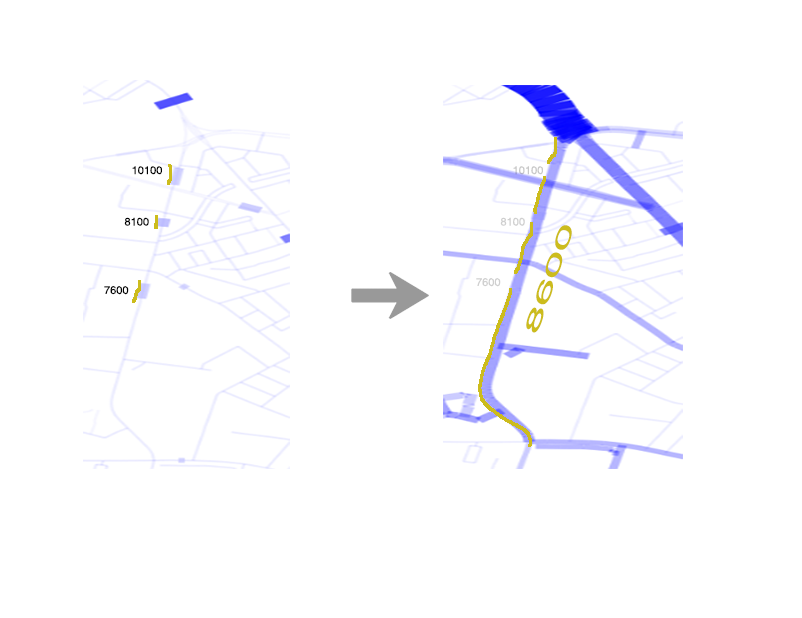
<style>
.page{position:relative;width:802px;height:618px;background:#ffffff}
.page>*{position:absolute;margin:0}
.t1{font:11px "Helvetica";letter-spacing:0.003em;color:#000000}
.t2{font:11px "Helvetica";letter-spacing:0.003em;color:#c9c9c9}
.t3{font:11px "Helvetica";letter-spacing:0.003em;color:#cfcfcf}
.t4{font:19.8px "Helvetica";letter-spacing:0.003em;color:#ccbc1d;scale:2.62 1}
</style>
<div class="page">
<p class="t1" style="left:132px;top:166px;width:30px;height:9px">10100</p>
<p class="t2" style="left:513px;top:166px;width:30px;height:9px">10100</p>
<p class="t1" style="left:124px;top:217px;width:25px;height:9px">8100</p>
<p class="t3" style="left:500px;top:217px;width:25px;height:9px">8100</p>
<p class="t4" style="left:526px;top:225px;width:46px;height:108px;rotate:-71deg">8600</p>
<p class="t3" style="left:476px;top:278px;width:25px;height:9px">7600</p>
<p class="t1" style="left:104px;top:286px;width:25px;height:9px">7600</p>
</div>
